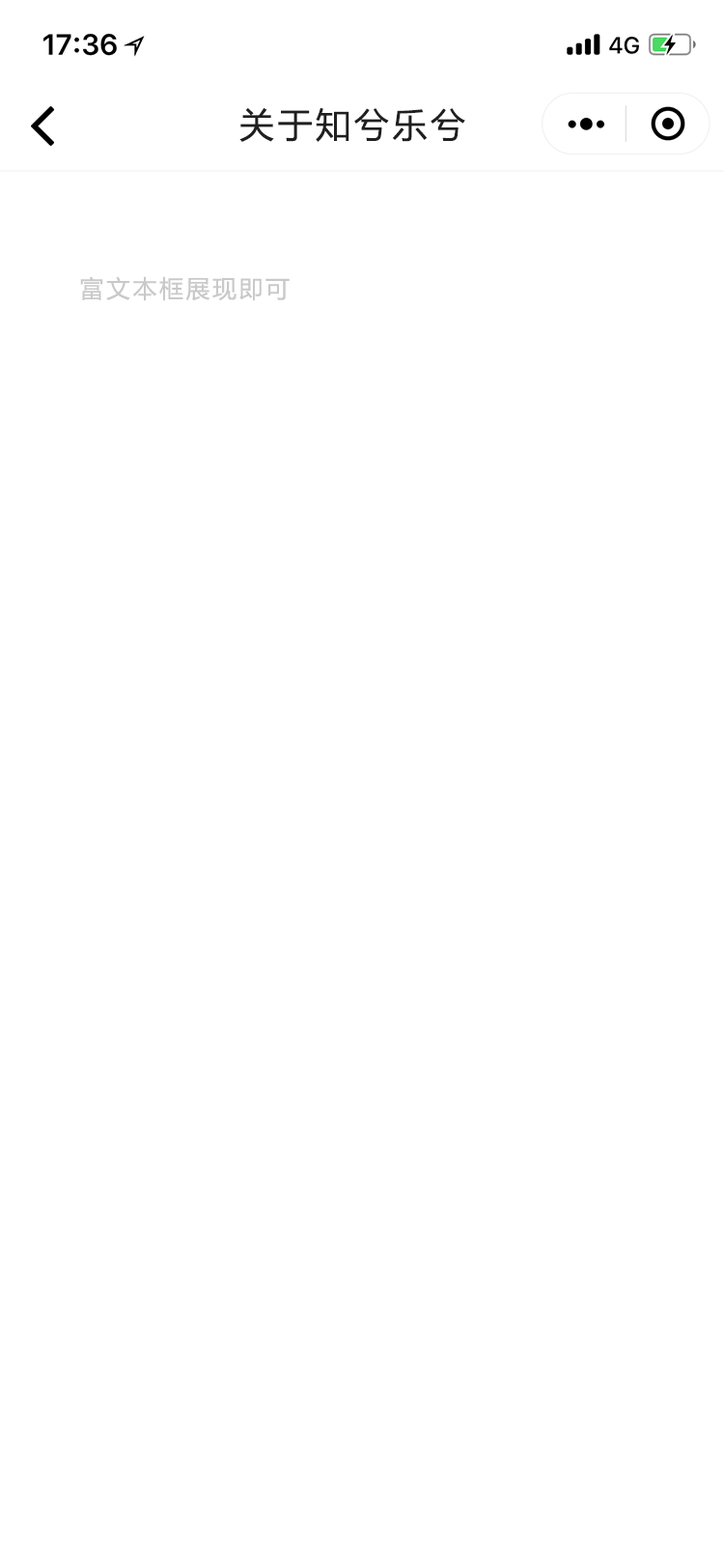
<style>
.page{position:relative;width:724px;height:1568px;background:#ffffff}
.page>*{position:absolute;margin:0}
.t1{font:34.8px "MicrosoftYaHei";letter-spacing:0.1em;color:#201f20}
.t2{font:24.1px "MicrosoftYaHei";letter-spacing:0.1em;color:#cac9c9}
</style>
<div class="page">
<p class="t1" style="left:239px;top:107px;width:226px;height:35px">关于知兮乐兮</p>
<p class="t2" style="left:80px;top:276px;width:210px;height:25px">富文本框展现即可</p>
</div>
